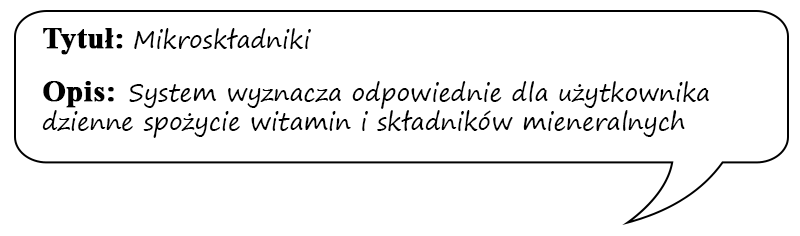
<style>
.page{position:relative;width:800px;height:236px;background:#ffffff}
.page>*{position:absolute;margin:0}
.t1{font:24px "SegoePrint";color:#000000}
.t2{font:30px "TimesNewRomanPS-BoldMT";color:#000000;font-weight:bold}
</style>
<div class="page">
<p class="t1" style="left:42px;top:28px;width:667px;height:110px"><span class="t2">Tytuł: </span>Mikroskładniki<br><br><span class="t2">Opis:  </span>System wyznacza odpowiednie dla użytkownika dzienne spożycie witamin i składników mieneralnych</p>
</div>
